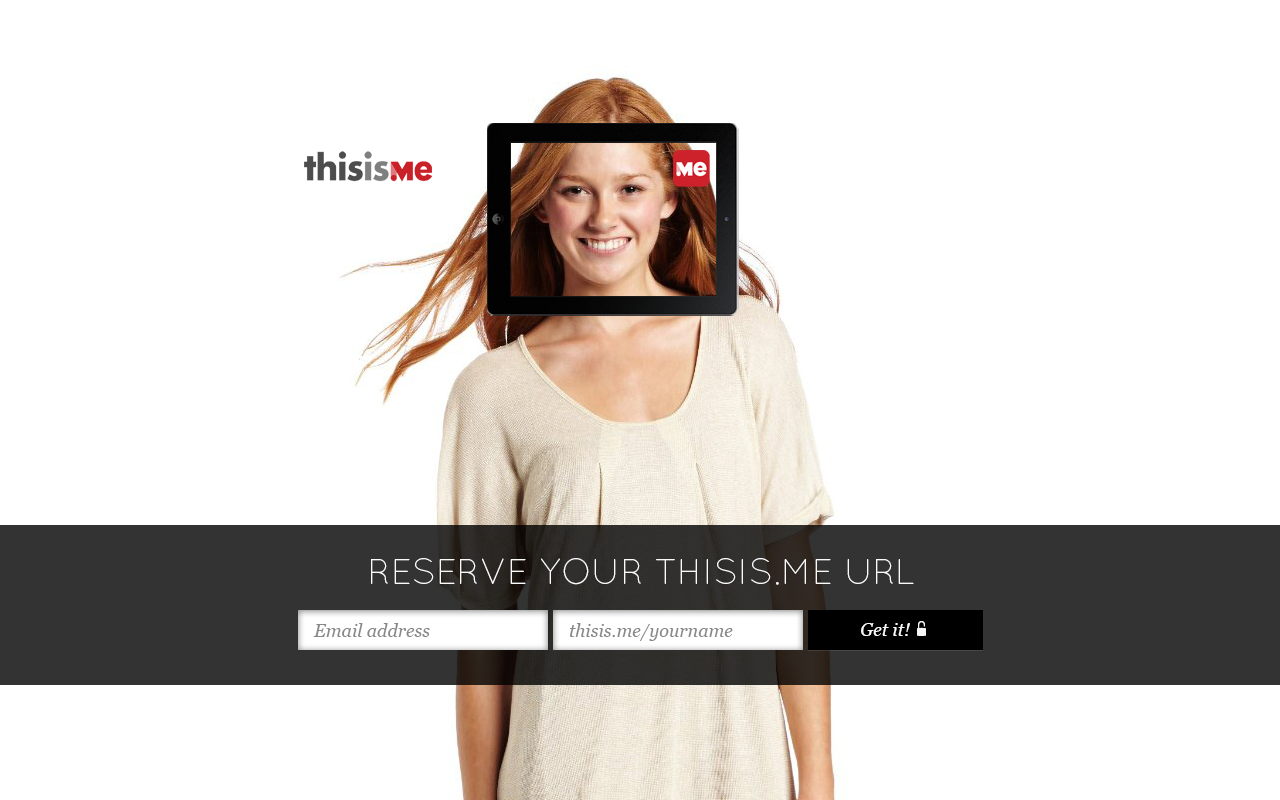
<style>
.page{position:relative;width:1280px;height:800px;background:#ffffff}
.page>*{position:absolute;margin:0}
.t1{font:36px "QuicksandLight-Regular";color:#fafafa;text-transform:uppercase}
.t2{font:18px "Georgia-Italic";color:#888888}
.t3{font:18px "Georgia-Italic";color:#fafafa}
</style>
<div class="page">
<p class="t1" style="left:371px;top:558px;width:543px;height:27px">Reserve your thisis.me url</p>
<p class="t2" style="left:313px;top:623px;width:117px;height:14px">Email address</p>
<p class="t2" style="left:570px;top:623px;width:163px;height:18px">thisis.me/yourname</p>
<p class="t3" style="left:861px;top:623px;width:49px;height:13px">Get it!</p>
</div>
